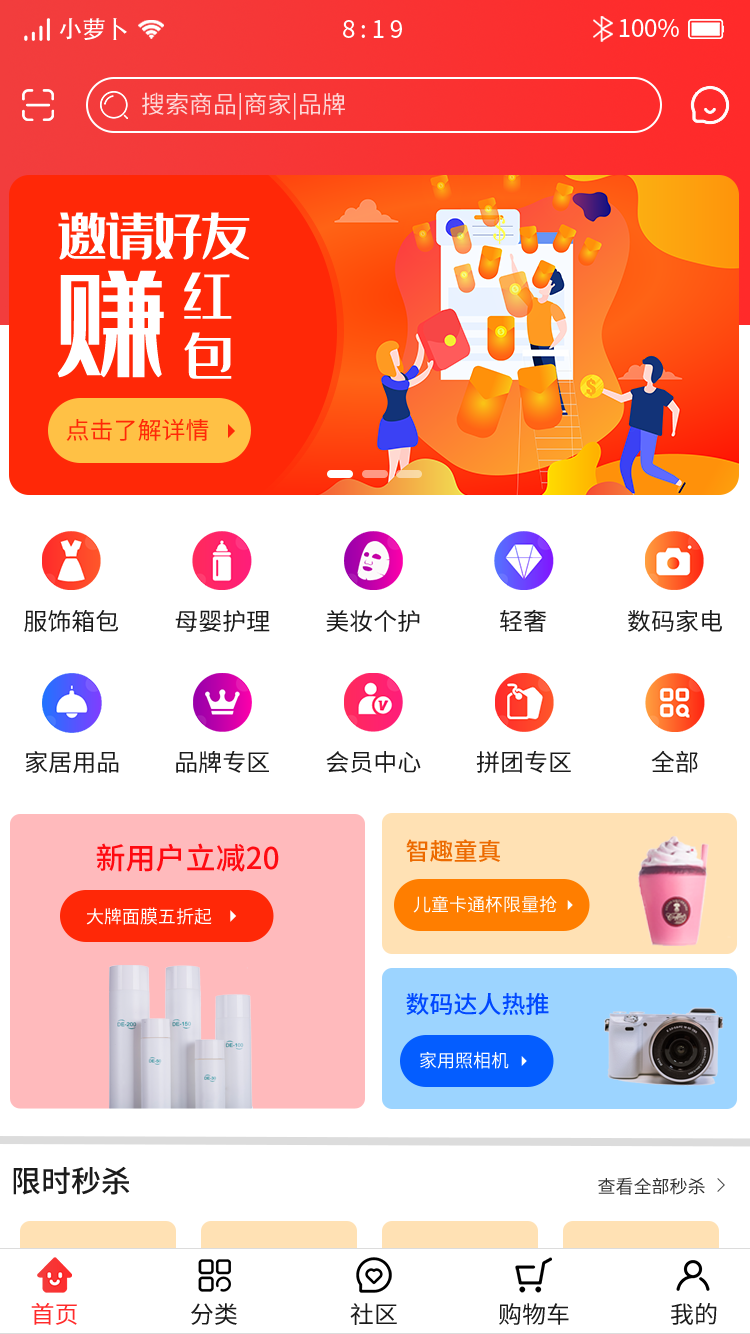
<style>
.page{position:relative;width:750px;height:1334px;background:#ffffff}
.page>*{position:absolute;margin:0}
.t1{font:24px "AdobeHeitiStd-Regular";color:#ffffff}
.t2{font:24px "SourceHanSansCN-Regular";letter-spacing:0.2em;color:#ffffff}
.t3{font:24px "SourceHanSansCN-Regular";color:#ffffff}
.t4{font:24px "SourceHanSansCN-Regular";color:#fdd7d7}
.t5{font:48px/60px "35--Regular";color:#ffffff}
.t6{font:108.6px "35--Regular";color:#ffffff}
.t7{font:24px "SourceHanSansCN-Regular";color:#ff2807}
.t8{font:23.9px "SourceHanSansCN-Regular";color:#1b1b1b}
.t9{font:30px "SourceHanSansCN-Medium";color:#ff0a11}
.t10{font:24px "SourceHanSansCN-Medium";color:#ec6a00}
.t11{font:18px "SourceHanSansCN-Regular";color:#ffffff}
.t12{font:24px "SourceHanSansCN-Medium";color:#0048ff}
.t13{font:30px "SourceHanSansCN-Medium";color:#1b1b1b}
.t14{font:18px "SourceHanSansCN-Regular";color:#323232}
.t15{font:23.7px "SourceHanSansCN-Regular";color:#ff2a2a}
.t16{font:23.7px "SourceHanSansCN-Regular";color:#1b1b1b}
</style>
<div class="page">
<p class="t1" style="left:59px;top:18px;width:68px;height:22px">小萝卜</p>
<p class="t2" style="left:343px;top:20px;width:59px;height:18px">8:19</p>
<p class="t3" style="left:619px;top:19px;width:60px;height:18px">100%</p>
<p class="t4" style="left:142px;top:92px;width:203px;height:28px">搜索商品|商家|品牌</p>
<p class="t5" style="left:58px;top:212px;width:192px;height:167px">邀请好友<br>         红<br>         包</p>
<p class="t6" style="left:57px;top:270px;width:107px;height:108px">赚</p>
<p class="t7" style="left:66px;top:418px;width:143px;height:23px">点击了解详情</p>
<p class="t8" style="left:24px;top:610px;width:94px;height:22px">服饰箱包</p>
<p class="t8" style="left:175px;top:610px;width:95px;height:22px">母婴护理</p>
<p class="t8" style="left:326px;top:610px;width:94px;height:22px">美妆个护</p>
<p class="t8" style="left:500px;top:609px;width:47px;height:23px">轻奢</p>
<p class="t8" style="left:628px;top:610px;width:94px;height:22px">数码家电</p>
<p class="t8" style="left:651px;top:750px;width:47px;height:23px">全部</p>
<p class="t8" style="left:25px;top:751px;width:94px;height:22px">家居用品</p>
<p class="t8" style="left:176px;top:751px;width:93px;height:22px">品牌专区</p>
<p class="t8" style="left:326px;top:751px;width:95px;height:22px">会员中心</p>
<p class="t8" style="left:476px;top:751px;width:95px;height:22px">拼团专区</p>
<p class="t9" style="left:96px;top:843px;width:183px;height:29px">新用户立减20</p>
<p class="t10" style="left:406px;top:839px;width:95px;height:23px">智趣童真</p>
<p class="t11" style="left:413px;top:895px;width:144px;height:18px">儿童卡通杯限量抢</p>
<p class="t11" style="left:86px;top:907px;width:126px;height:18px">大牌面膜五折起</p>
<p class="t12" style="left:406px;top:992px;width:143px;height:23px">数码达人热推</p>
<p class="t11" style="left:420px;top:1051px;width:89px;height:18px">家用照相机</p>
<p class="t13" style="left:13px;top:1166px;width:117px;height:29px">限时秒杀</p>
<p class="t14" style="left:598px;top:1177px;width:107px;height:18px">查看全部秒杀</p>
<p class="t15" style="left:31px;top:1303px;width:46px;height:22px">首页</p>
<p class="t16" style="left:191px;top:1303px;width:46px;height:22px">分类</p>
<p class="t16" style="left:350px;top:1303px;width:47px;height:22px">社区</p>
<p class="t16" style="left:499px;top:1303px;width:70px;height:22px">购物车</p>
<p class="t16" style="left:671px;top:1303px;width:46px;height:22px">我的</p>
</div>
